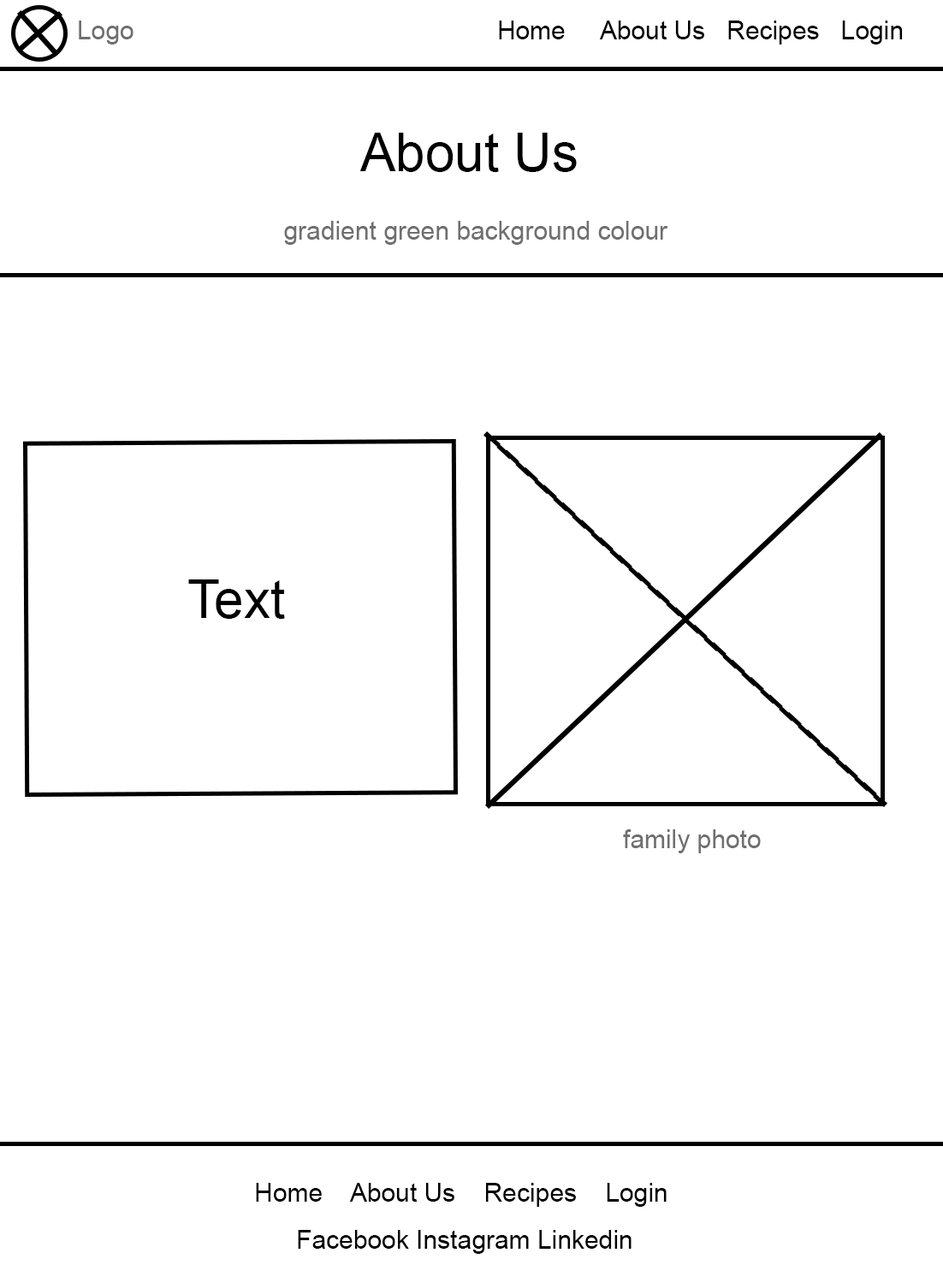
<style>
.page{position:relative;width:943px;height:1265px;background:#ffffff}
.page>*{position:absolute;margin:0}
.t1{font:25.7px "ArialMT";color:#6f6f6f}
.t2{font:25.7px "ArialMT";color:#000000}
.t3{font:53px "ArialMT";color:#000000}
</style>
<div class="page">
<p class="t1" style="left:79px;top:21px;width:54px;height:23px">Logo</p>
<p class="t2" style="left:499px;top:21px;width:404px;height:23px">Home     About Us   Recipes   Login</p>
<p class="t3" style="left:359px;top:133px;width:218px;height:39px">About Us</p>
<p class="t1" style="left:284px;top:221px;width:384px;height:24px">gradient green background colour</p>
<p class="t3" style="left:188px;top:579px;width:97px;height:40px">Text</p>
<p class="t1" style="left:623px;top:829px;width:138px;height:24px">family photo</p>
<p class="t2" style="left:256px;top:1182px;width:411px;height:24px">Home    About Us    Recipes    Login</p>
<p class="t2" style="left:298px;top:1230px;width:333px;height:24px">Facebook Instagram Linkedin</p>
</div>
